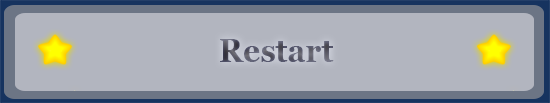
<style>
.page{position:relative;width:550px;height:103px;background:#b2b5bf}
.page>*{position:absolute;margin:0}
.t1{font:33.3px "Georgia-Bold";color:#5b5b6b;scale:0.9 1}
</style>
<div class="page">
<p class="t1" style="left:220px;top:39px;width:114px;height:23px">Restart</p>
</div>
